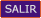
<style>
.page{position:relative;width:41px;height:18px;background:#441177}
.page>*{position:absolute;margin:0}
.t1{font:10px "Verdana";color:#dadada;font-weight:bold}
</style>
<div class="page">
<p class="t1" style="left:5px;top:4px;width:32px;height:9px">SALIR</p>
</div>
